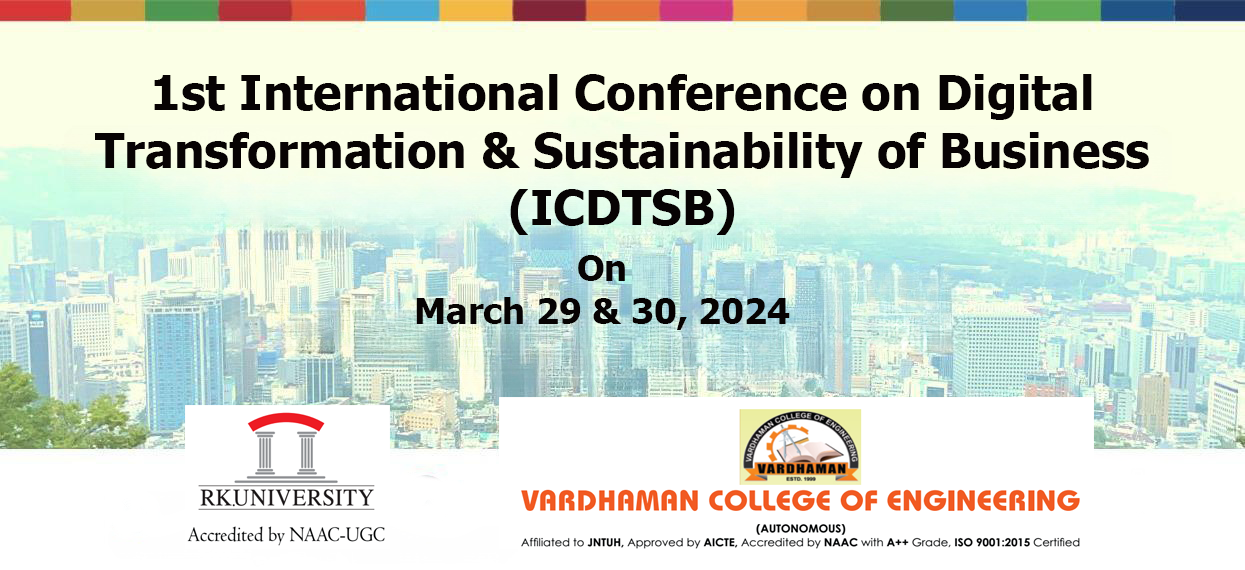
<style>
.page{position:relative;width:1245px;height:570px;background:#ffffff}
.page>*{position:absolute;margin:0}
.t1{font:48px "Tahoma-Bold";color:#070303}
.t2{font:36px "Tahoma-Bold";color:#070303}
</style>
<div class="page">
<p class="t1" style="left:95px;top:74px;width:1054px;height:161px;text-align:center">1st International Conference on Digital <br>           Transformation &amp; Sustainability of Business<br>           (ICDTSB)</p>
<p class="t2" style="left:416px;top:255px;width:374px;height:75px;text-align:center">On<br>March 29 &amp; 30, 2024</p>
</div>
